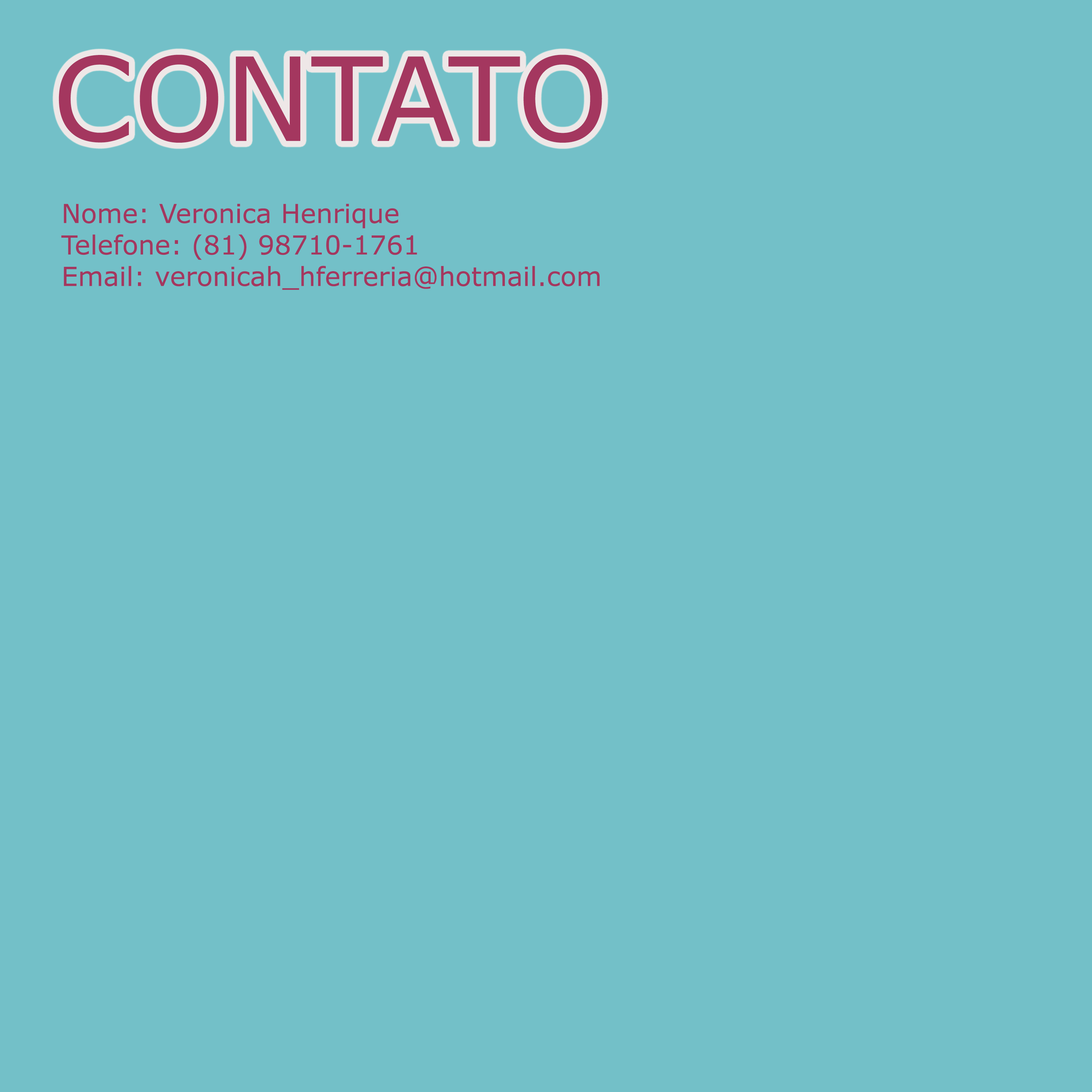
<style>
.page{position:relative;width:1092px;height:1092px;background:#73c0c8}
.page>*{position:absolute;margin:0}
.t1{font:116.1px "Verdana";color:#a4375f}
.t2{font:26.2px "Verdana";color:#a4375f}
</style>
<div class="page">
<p class="t1" style="left:59px;top:55px;width:543px;height:88px">CONTATO</p>
<p class="t2" style="left:61px;top:204px;width:539px;height:86px">Nome: Veronica Henrique<br>Telefone: (81) 98710-1761<br>Email: veronicah_hferreria@hotmail.com</p>
</div>
